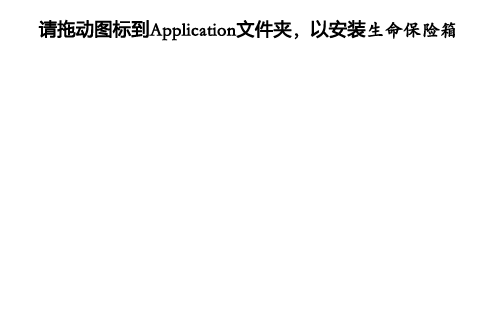
<style>
.page{position:relative;width:500px;height:320px;background:#ffffff}
.page>*{position:absolute;margin:0}
.t1{font:18px "STKaiti";color:#000000;font-weight:bold}
.t2{font:18px "MicrosoftYaHeiUI";color:#000000;font-weight:bold}
</style>
<div class="page">
<p class="t1" style="left:38px;top:19px;width:418px;height:22px"><span class="t2">请拖动图标到</span>Application<span class="t2">文件夹</span>，<span class="t2">以安装</span>生命保险箱</p>
</div>
